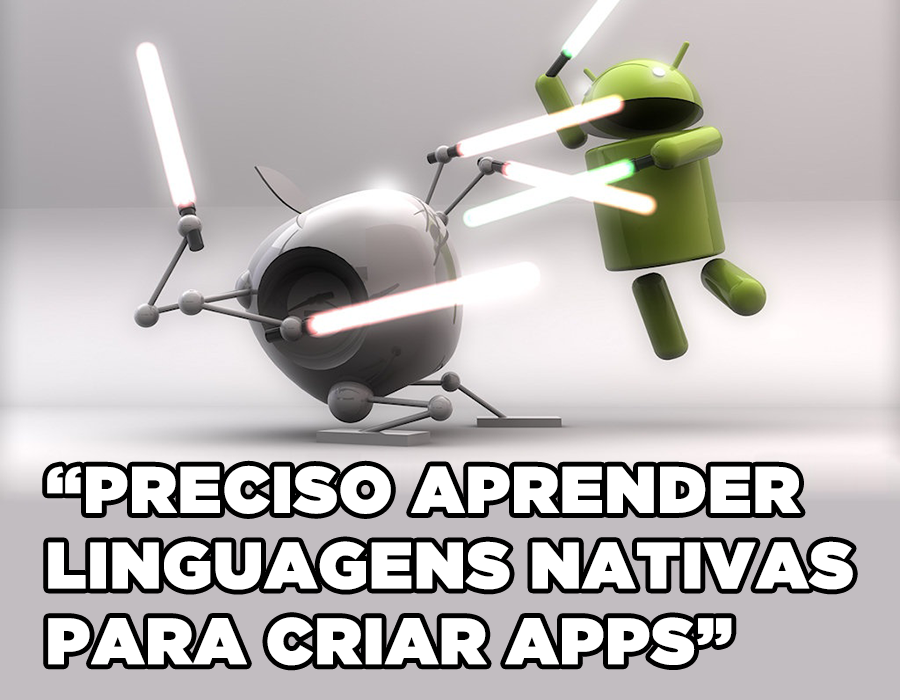
<style>
.page{position:relative;width:900px;height:700px}
.page>*{position:absolute;margin:0}
.t1{font:65px/75.7px "GothamUltra";color:#ffffff;font-weight:bold}
</style>
<div class="page">
<p class="t1" style="left:47px;top:465px;width:806px;height:201px">“PRECISO APRENDER<br>LINGUAGENS NATIVAS<br>PARA CRIAR APPS”</p>
</div>
